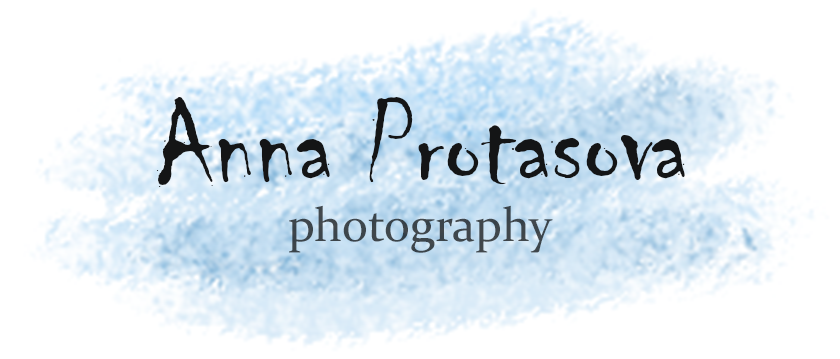
<style>
.page{position:relative;width:840px;height:359px;background:#ffffff}
.page>*{position:absolute;margin:0}
.t1{font:120px "Chiller-Regular";color:#141516}
.t2{font:48px "Constantia";color:#3d464b}
</style>
<div class="page">
<p class="t1" style="left:156px;top:97px;width:529px;height:90px">Anna Protasova</p>
<p class="t2" style="left:289px;top:205px;width:264px;height:48px">photography</p>
</div>
